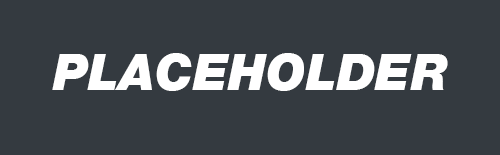
<style>
.page{position:relative;width:500px;height:155px;background:#343a40}
.page>*{position:absolute;margin:0}
.t1{font:50px "HelveticaNeue-BlackItalic";color:#ffffff}
</style>
<div class="page">
<p class="t1" style="left:52px;top:53px;width:396px;height:38px">PLACEHOLDER</p>
</div>
